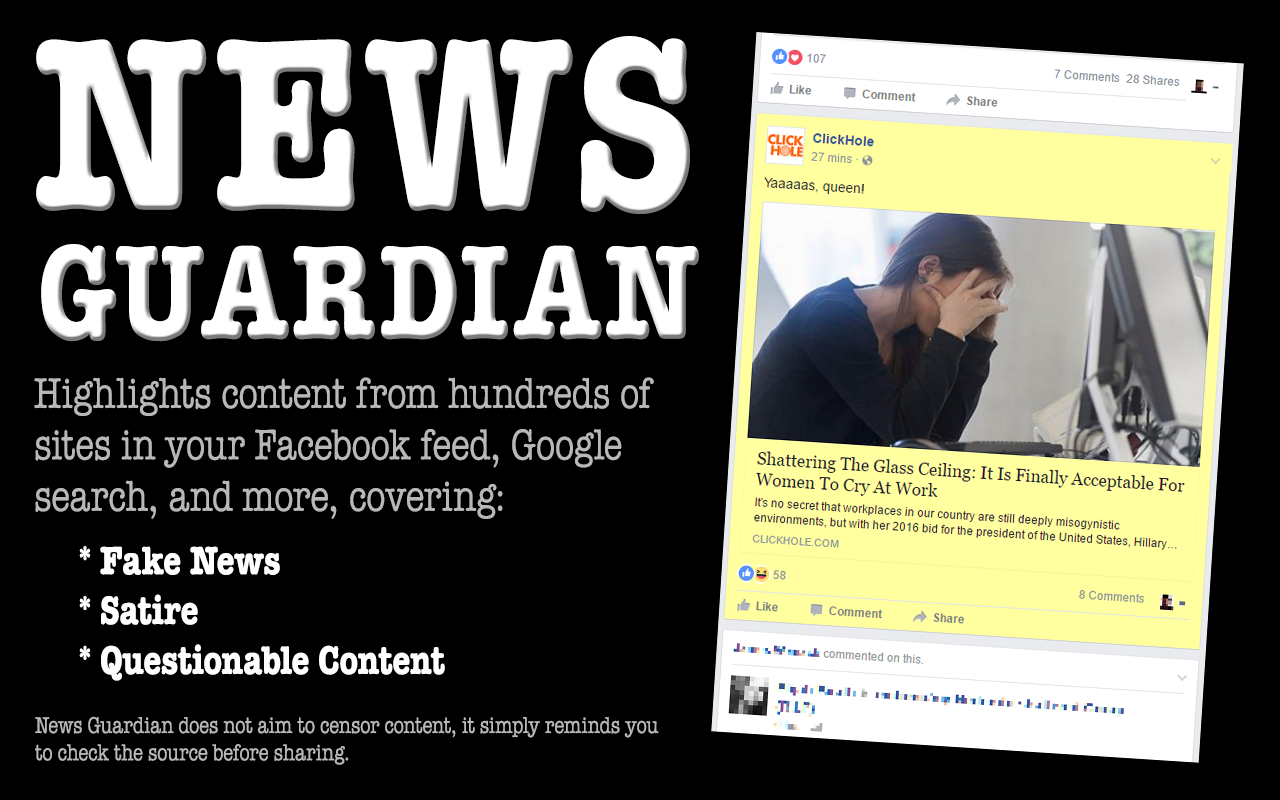
<style>
.page{position:relative;width:1280px;height:800px;background:#000000}
.page>*{position:absolute;margin:0}
.t1{font:246.7px "Editor-Bold";color:#ffffff;text-transform:uppercase;scale:0.8 1}
.t2{font:134.4px "Editor-Bold";color:#ffffff;text-transform:uppercase;scale:0.8 1}
.t3{font:42.9px "Editor-";color:#b8b8b8;scale:0.8 1}
.t4{font:39.8px/49.8px "Editor-Bold";color:#ffffff;scale:0.8 1}
.t5{font:39.8px/49.8px "Editor-";color:#ffffff;scale:0.8 1}
.t6{font:22.8px "Editor-";color:#b8b8b8;scale:0.8 1}
</style>
<div class="page">
<p class="t1" style="left:36px;top:36px;width:654px;height:178px">News</p>
<p class="t2" style="left:41px;top:244px;width:658px;height:98px">Guardian</p>
<p class="t3" style="left:34px;top:377px;width:620px;height:142px">Highlights content from hundreds of <br>sites in your Facebook feed, Google <br>search, and more, covering:</p>
<p class="t4" style="left:79px;top:546px;width:366px;height:135px"><span class="t5">   </span>* Fake News<br>   * Satire<br>   * Questionable Content</p>
<p class="t6" style="left:35px;top:716px;width:624px;height:49px">News Guardian does not aim to censor content, it simply reminds you <br>to check the source before sharing.</p>
</div>
